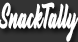
<style>
.page{position:relative;width:78px;height:42px;background:#333333}
.page>*{position:absolute;margin:0}
.t1{font:29px "Bernadette";color:#ffffff;font-weight:bold;scale:0.54 1}
</style>
<div class="page">
<p class="t1" style="left:0px;top:2px;width:78px;height:40px">SnackTally</p>
</div>
